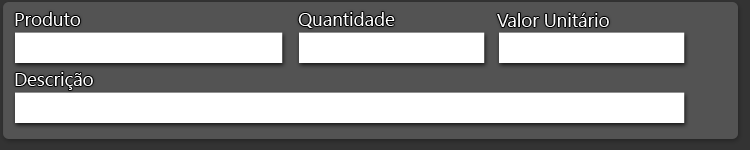
<style>
.page{position:relative;width:750px;height:150px;background:#535353}
.page>*{position:absolute;margin:0}
.t1{font:18.7px "SegoeUI";color:#ffffff}
</style>
<div class="page">
<p class="t1" style="left:15px;top:12px;width:66px;height:14px">Produto</p>
<p class="t1" style="left:298px;top:12px;width:97px;height:16px">Quantidade</p>
<p class="t1" style="left:497px;top:13px;width:112px;height:14px">Valor Unitário</p>
<p class="t1" style="left:15px;top:72px;width:78px;height:18px">Descrição</p>
</div>
